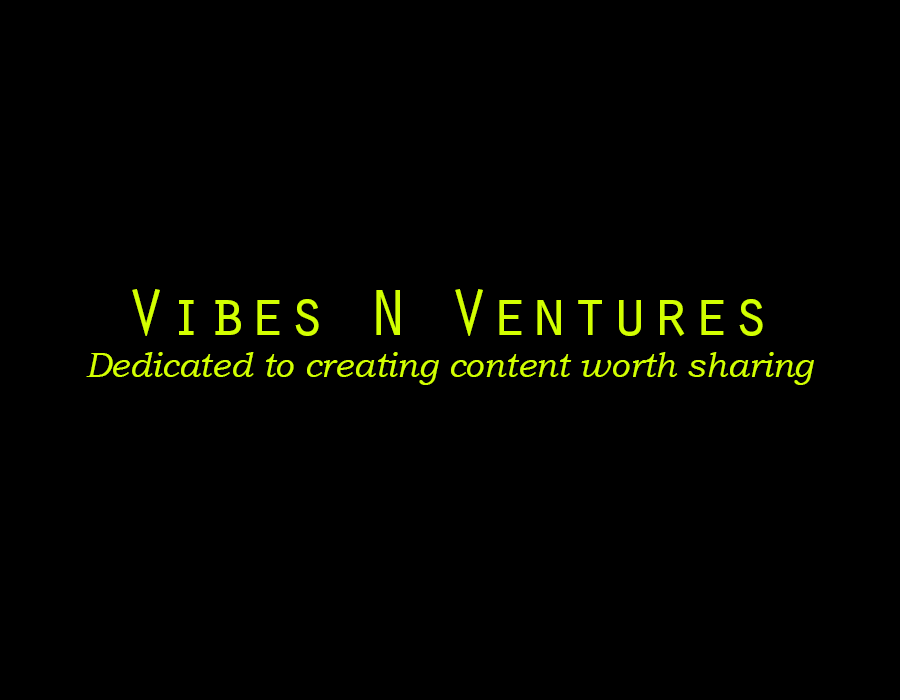
<style>
.page{position:relative;width:900px;height:700px;background:#000000}
.page>*{position:absolute;margin:0}
.t1{font:34.8px "BookmanOldStyle-Italic";color:#d2ff00}
.t2{font:67.2px "OratorStd";color:#d2ff00}
</style>
<div class="page">
<p class="t1" style="left:86px;top:289px;width:728px;height:96px;text-align:center"><span class="t2">Vibes N Ventures<br></span>Dedicated to creating content worth sharing</p>
</div>
